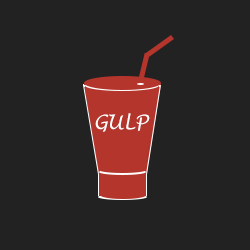
<style>
.page{position:relative;width:250px;height:250px;background:#222222}
.page>*{position:absolute;margin:0}
.t1{font:20px "LucidaHandwriting-Italic";letter-spacing:-0.01em;color:#ffffff;font-variant:small-caps;scale:0.95 1}
</style>
<div class="page">
<p class="t1" style="left:95px;top:113px;width:55px;height:19px">GULP</p>
</div>
